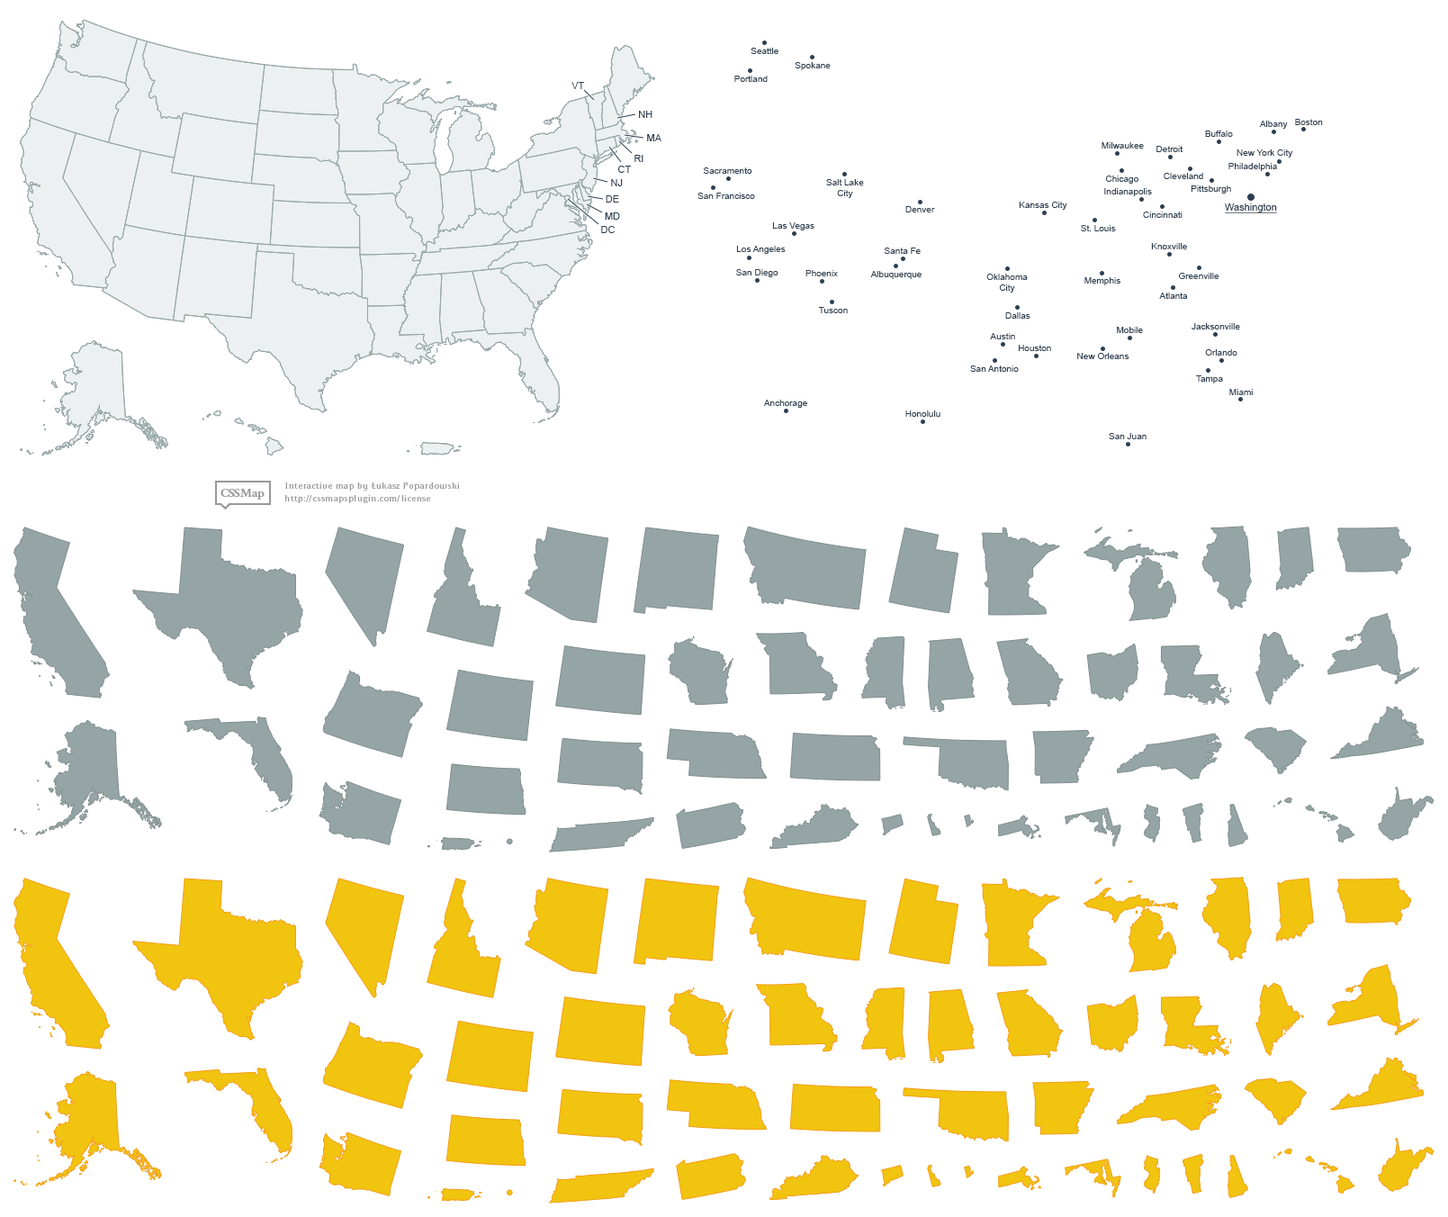
<style>
.page{position:relative;width:1448px;height:1217px;background:#ffffff}
.page>*{position:absolute;margin:0}
.t1{font:9px "ArialMT";color:#2c3e50}
.t2{font:9.9px "ArialMT";color:#2c3e50}
.t3{font:9.9px "ArialMT";color:#2c3e50;text-decoration:underline}
</style>
<div class="page">
<p class="t1" style="left:751px;top:48px;width:27px;height:6px">Seattle</p>
<p class="t1" style="left:795px;top:62px;width:36px;height:8px">Spokane</p>
<p class="t1" style="left:734px;top:76px;width:34px;height:6px">Portland</p>
<p class="t2" style="left:571px;top:82px;width:14px;height:7px">VT</p>
<p class="t2" style="left:639px;top:111px;width:13px;height:7px">NH</p>
<p class="t1" style="left:1259px;top:121px;width:29px;height:8px">Albany</p>
<p class="t1" style="left:1295px;top:119px;width:28px;height:6px">Boston</p>
<p class="t2" style="left:647px;top:134px;width:14px;height:7px">MA</p>
<p class="t1" style="left:1205px;top:130px;width:28px;height:7px">Buffalo</p>
<p class="t1" style="left:1102px;top:142px;width:42px;height:6px">Milwaukee</p>
<p class="t1" style="left:1156px;top:146px;width:27px;height:6px">Detroit</p>
<p class="t1" style="left:1237px;top:149px;width:56px;height:8px">New York City</p>
<p class="t2" style="left:634px;top:155px;width:9px;height:7px">RI</p>
<p class="t2" style="left:618px;top:166px;width:14px;height:7px">CT</p>
<p class="t1" style="left:703px;top:167px;width:49px;height:7px">Sacramento</p>
<p class="t1" style="left:1164px;top:173px;width:39px;height:6px">Cleveland</p>
<p class="t1" style="left:1228px;top:163px;width:49px;height:8px">Philadelphia</p>
<p class="t2" style="left:611px;top:179px;width:12px;height:7px">NJ</p>
<p class="t1" style="left:826px;top:179px;width:38px;height:19px;text-align:center">Salt Lake<br>City</p>
<p class="t1" style="left:1105px;top:175px;width:33px;height:9px">Chicago</p>
<p class="t1" style="left:1191px;top:185px;width:40px;height:8px">Pittsburgh</p>
<p class="t2" style="left:606px;top:195px;width:13px;height:7px">DE</p>
<p class="t1" style="left:697px;top:193px;width:58px;height:6px">San Francisco</p>
<p class="t1" style="left:1104px;top:188px;width:48px;height:8px">Indianapolis</p>
<p class="t1" style="left:905px;top:206px;width:30px;height:6px">Denver</p>
<p class="t1" style="left:1019px;top:202px;width:48px;height:8px">Kansas City</p>
<p class="t3" style="left:1225px;top:203px;width:52px;height:10px">Washington</p>
<p class="t2" style="left:605px;top:212px;width:15px;height:8px">MD</p>
<p class="t1" style="left:1143px;top:211px;width:40px;height:7px">Cincinnati</p>
<p class="t2" style="left:601px;top:226px;width:14px;height:7px">DC</p>
<p class="t1" style="left:772px;top:222px;width:42px;height:8px">Las Vegas</p>
<p class="t1" style="left:1081px;top:225px;width:35px;height:6px">St. Louis</p>
<p class="t1" style="left:736px;top:246px;width:50px;height:8px">Los Angeles</p>
<p class="t1" style="left:1151px;top:243px;width:36px;height:6px">Knoxville</p>
<p class="t1" style="left:884px;top:247px;width:37px;height:7px">Santa Fe</p>
<p class="t1" style="left:736px;top:269px;width:42px;height:8px">San Diego</p>
<p class="t1" style="left:805px;top:270px;width:33px;height:6px">Phoenix</p>
<p class="t1" style="left:870px;top:271px;width:52px;height:8px">Albuquerque</p>
<p class="t1" style="left:986px;top:274px;width:42px;height:18px;text-align:center">Oklahoma<br>City</p>
<p class="t1" style="left:1084px;top:277px;width:36px;height:8px">Memphis</p>
<p class="t1" style="left:1179px;top:273px;width:40px;height:6px">Greenville</p>
<p class="t1" style="left:1159px;top:292px;width:29px;height:7px">Atlanta</p>
<p class="t1" style="left:818px;top:307px;width:30px;height:6px">Tuscon</p>
<p class="t1" style="left:1005px;top:312px;width:25px;height:7px">Dallas</p>
<p class="t1" style="left:1117px;top:327px;width:26px;height:6px">Mobile</p>
<p class="t1" style="left:1192px;top:323px;width:48px;height:6px">Jacksonville</p>
<p class="t1" style="left:990px;top:333px;width:25px;height:6px">Austin</p>
<p class="t1" style="left:1019px;top:345px;width:32px;height:6px">Houston</p>
<p class="t1" style="left:1077px;top:353px;width:52px;height:6px">New Orleans</p>
<p class="t1" style="left:1205px;top:349px;width:32px;height:6px">Orlando</p>
<p class="t1" style="left:970px;top:365px;width:49px;height:7px">San Antonio</p>
<p class="t1" style="left:1196px;top:375px;width:27px;height:8px">Tampa</p>
<p class="t1" style="left:1229px;top:389px;width:24px;height:6px">Miami</p>
<p class="t1" style="left:763px;top:400px;width:44px;height:8px">Anchorage</p>
<p class="t1" style="left:905px;top:410px;width:35px;height:7px">Honolulu</p>
<p class="t1" style="left:1109px;top:433px;width:38px;height:6px">San Juan</p>
</div>
